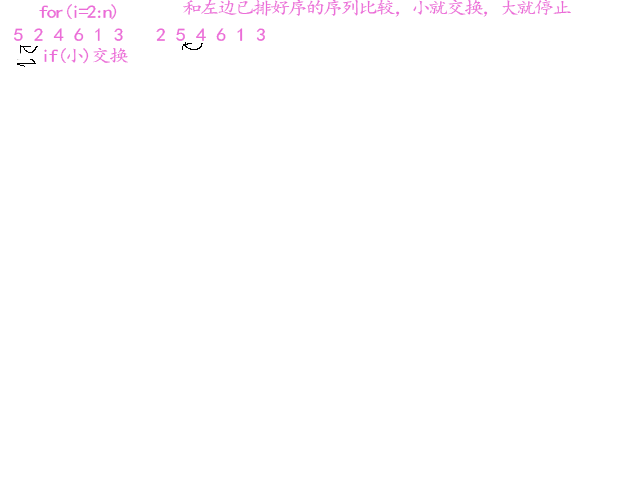
<style>
.page{position:relative;width:640px;height:480px;background:#ffffff}
.page>*{position:absolute;margin:0}
.t1{font:17.8px "¿¬Ìå";letter-spacing:-0.1em;color:#ec6cd8;scale:1.12 1}
.t2{font:17.8px "¿¬Ìå";letter-spacing:-0.12em;color:#ec6cd8;scale:1.12 1}
.t3{font:17.8px "¿¬Ìå";color:#ec6cd8;scale:1.12 1}
</style>
<div class="page">
<p class="t1" style="left:39px;top:4px;width:78px;height:16px">for(i=2:n)</p>
<p class="t2" style="left:183px;top:0px;width:388px;height:17px">和左边已排好序的序列比较，小就交换，大就停止</p>
<p class="t3" style="left:14px;top:28px;width:109px;height:13px">5 2 4 6 1 3</p>
<p class="t3" style="left:156px;top:28px;width:109px;height:13px">2 5 4 6 1 3</p>
<p class="t1" style="left:44px;top:48px;width:84px;height:16px">if(小)交换</p>
</div>
